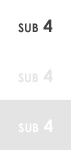
<style>
.page{position:relative;width:71px;height:150px;background:#ffffff}
.page>*{position:absolute;margin:0}
.t1{font:17px "CenturyGothic-Bold";color:#424242;font-variant:small-caps}
.t2{font:17px "CenturyGothic-Bold";color:#e4e4e4;font-variant:small-caps}
.t3{font:17px "CenturyGothic-Bold";color:#ffffff;font-variant:small-caps}
</style>
<div class="page">
<p class="t1" style="left:18px;top:19px;width:35px;height:14px">sub 4</p>
<p class="t2" style="left:18px;top:69px;width:35px;height:14px">sub 4</p>
<p class="t3" style="left:18px;top:119px;width:35px;height:14px">sub 4</p>
</div>
